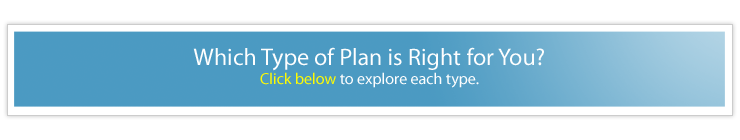
<style>
.page{position:relative;width:740px;height:140px;background:#ffffff}
.page>*{position:absolute;margin:0}
.t1{font:24px "MyriadPro-Regular";color:#fefefe}
.t2{font:16px "MyriadPro-Regular";color:#fefb03}
.t3{font:16px "MyriadPro-Regular";color:#fefefe}
</style>
<div class="page">
<p class="t1" style="left:193px;top:47px;width:351px;height:41px;text-align:center">Which Type of Plan is Right for You?<br><span class="t2">Click below</span><span class="t3"> to explore each type.</span></p>
</div>
